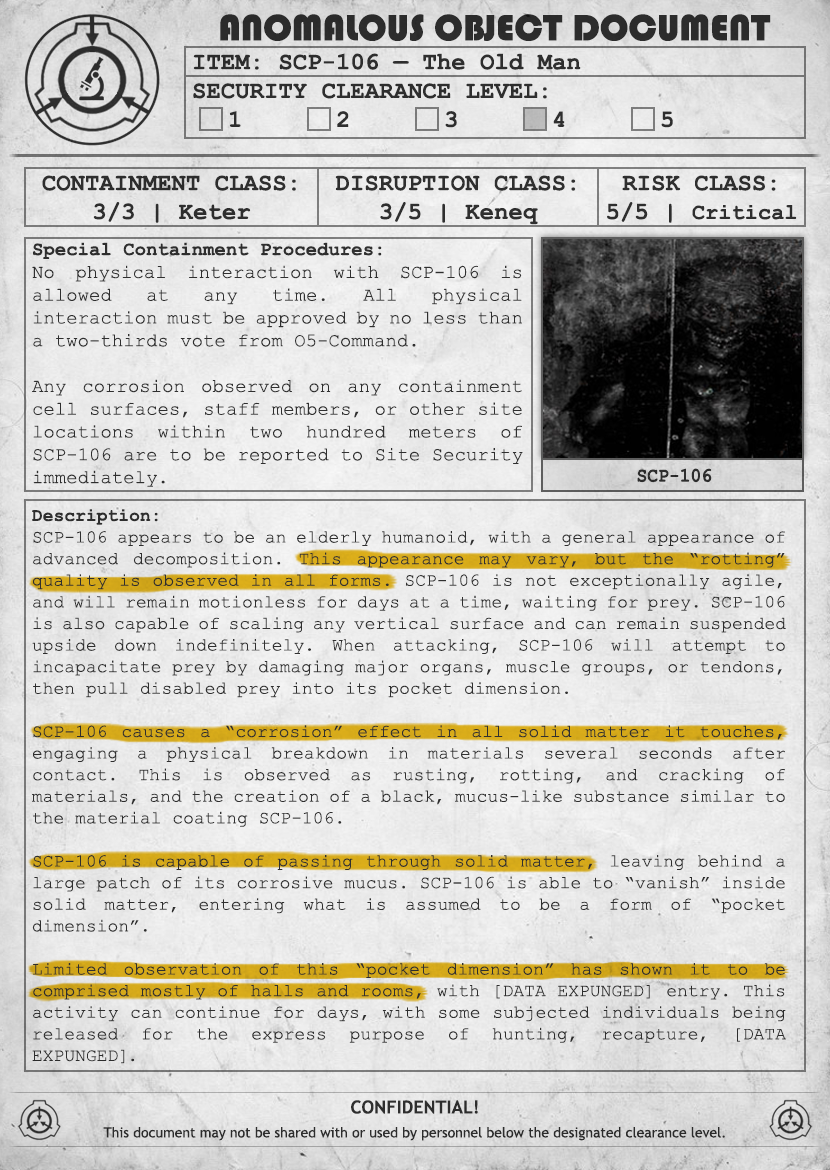
<style>
.page{position:relative;width:830px;height:1170px}
.page>*{position:absolute;margin:0}
.t1{font:38px "Bauhaus93";color:#333333;text-transform:uppercase}
.t2{font:24px "CourierNewPS-BoldMT";color:#333333}
.t3{font:24px "CourierNewPS-BoldMT";color:#333333;text-transform:uppercase}
.t4{font:22px "CourierNewPS-BoldMT";color:#333333}
.t5{font:19px "CourierNewPSMT";color:#333333}
.t6{font:19px "CourierNewPS-BoldMT";color:#333333}
.t7{font:20.1px "CourierNewPS-BoldMT";color:#333333;scale:0.9 1}
.t8{font:18px "CourierNewPSMT";color:#333333}
.t9{font:18px "CourierNewPS-BoldMT";color:#333333}
.t10{font:18px "CourierNewPSMT";letter-spacing:-0.1em;color:#333333}
.t11{font:14px/24px "TrebuchetMS";color:#333333}
.t12{font:18px/24px "TrebuchetMS-Bold";color:#333333}
</style>
<div class="page">
<p class="t1" style="left:220px;top:14px;width:551px;height:27px">anomalous object document</p>
<p class="t2" style="left:193px;top:53px;width:480px;height:75px">ITEM: SCP-106 — The Old Man<br><span class="t3">Security CLEARANCE LEVEL:</span> <br> 1   2   3   4   5</p>
<p class="t2" style="left:42px;top:175px;width:254px;height:48px;text-align:center">CONTAINMENT CLASS:<br>3/3 | Keter</p>
<p class="t2" style="left:335px;top:175px;width:241px;height:50px;text-align:center">DISRUPTION CLASS:<br>3/5 | Keneq</p>
<p class="t2" style="left:607px;top:175px;width:190px;height:48px;text-align:center">RISK CLASS:<br>5/5 | <span class="t4">Critical</span></p>
<p class="t5" style="left:32px;top:242px;width:491px;height:245px;text-align:justify"><span class="t6">Special Containment Procedures:<br></span>No physical interaction with SCP-106 is allowed at any time. All physical interaction must be approved by no less than a two-thirds vote from O5-Command.<br><br>Any corrosion observed on any containment cell surfaces, staff members, or other site locations within two hundred meters of SCP-106 are to be reported to Site Security immediately.</p>
<p class="t7" style="left:637px;top:468px;width:75px;height:15px">SCP-106</p>
<p class="t8" style="left:32px;top:509px;width:754px;height:555px;text-align:justify"><span class="t9">Description:<br></span>SCP-106 appears to be an elderly humanoid, with a general appearance of advanced decomposition. This appearance may vary, but the “rotting” quality is observed in all forms. SCP-106 is not exceptionally agile, and will remain motionless for days at a time, waiting for prey. SCP-106 is also capable of scaling any vertical surface and can remain suspended upside down indefinitely. When attacking, SCP-106 will attempt to incapacitate prey by damaging major organs, muscle groups, or tendons, then pull disabled prey into its pocket dimension.<br><br>SCP-106 causes a “corrosion” effect in all solid matter it touches, engaging a physical breakdown in materials several seconds after contact. This is observed as rusting, rotting, and cracking of materials, and the creation of a black, mucus-like substance similar to the material coating SCP-106.<br><br>SCP-106 is capable of passing through solid matter, leaving behind a large patch of its corrosive mucus. SCP-106 is able to “vanish” inside solid matter, entering what is assumed to be a form of “pocket dimension”.<br><br>Limited observation of this “pocket dimension” has shown it to be comprised mostly of halls and rooms, with [DATA EXPUNGED] entry. This activity can continue for days, with some subjected individuals being released for the express purpose of hunting, recapture, [DATA EXPUNGED<span class="t10">].</span></p>
<p class="t11" style="left:103px;top:1100px;width:622px;height:41px;text-align:center"><span class="t12">CONFIDENTIAL!<br></span>This document may not be shared with or used by personnel below the designated clearance level.</p>
</div>
